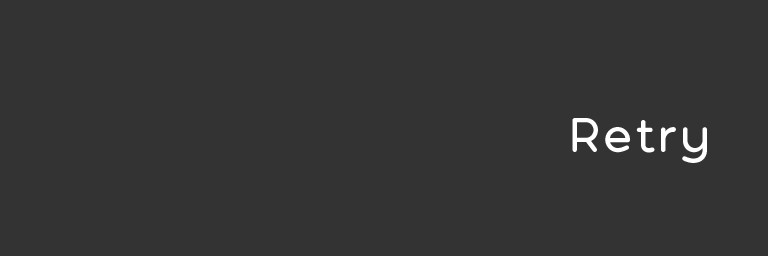
<style>
.page{position:relative;width:768px;height:256px;background:#333333}
.page>*{position:absolute;margin:0}
.t1{font:50px "PollyRounded-Regular";color:#ffffff}
</style>
<div class="page">
<p class="t1" style="left:572px;top:118px;width:135px;height:45px">Retry</p>
</div>
